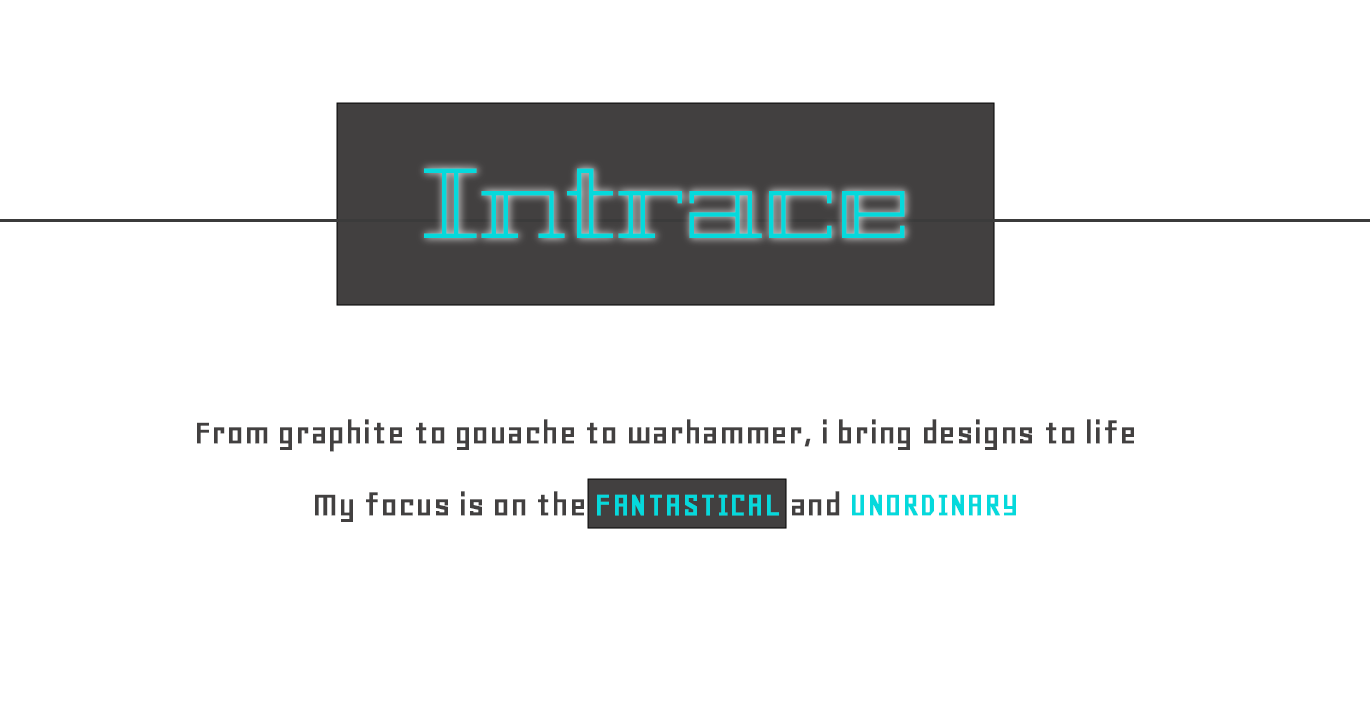
<style>
.page{position:relative;width:1370px;height:712px;background:#ffffff}
.page>*{position:absolute;margin:0}
.t1{font:100px "Geostar-Regular";color:#05d9dc}
.t2{font:36px/72px "Geo-Regular";letter-spacing:-0.01em;color:#424040;font-weight:bold}
.t3{font:36px/64px "Geo-Regular";letter-spacing:-0.01em;color:#424040;font-weight:bold}
.t4{font:36px/72px "Geo-Regular";letter-spacing:-0.01em;color:#05d9dc;text-transform:uppercase;font-weight:bold}
</style>
<div class="page">
<p class="t1" style="left:424px;top:168px;width:481px;height:70px">Intrace</p>
<p class="t2" style="left:197px;top:419px;width:937px;height:103px;text-align:center"><span class="t3">From graphite to gouache to </span>warhammer, i bring designs to life<br>My focus is on the <span class="t4">fantastical </span>and <span class="t4">unordinary</span></p>
</div>
